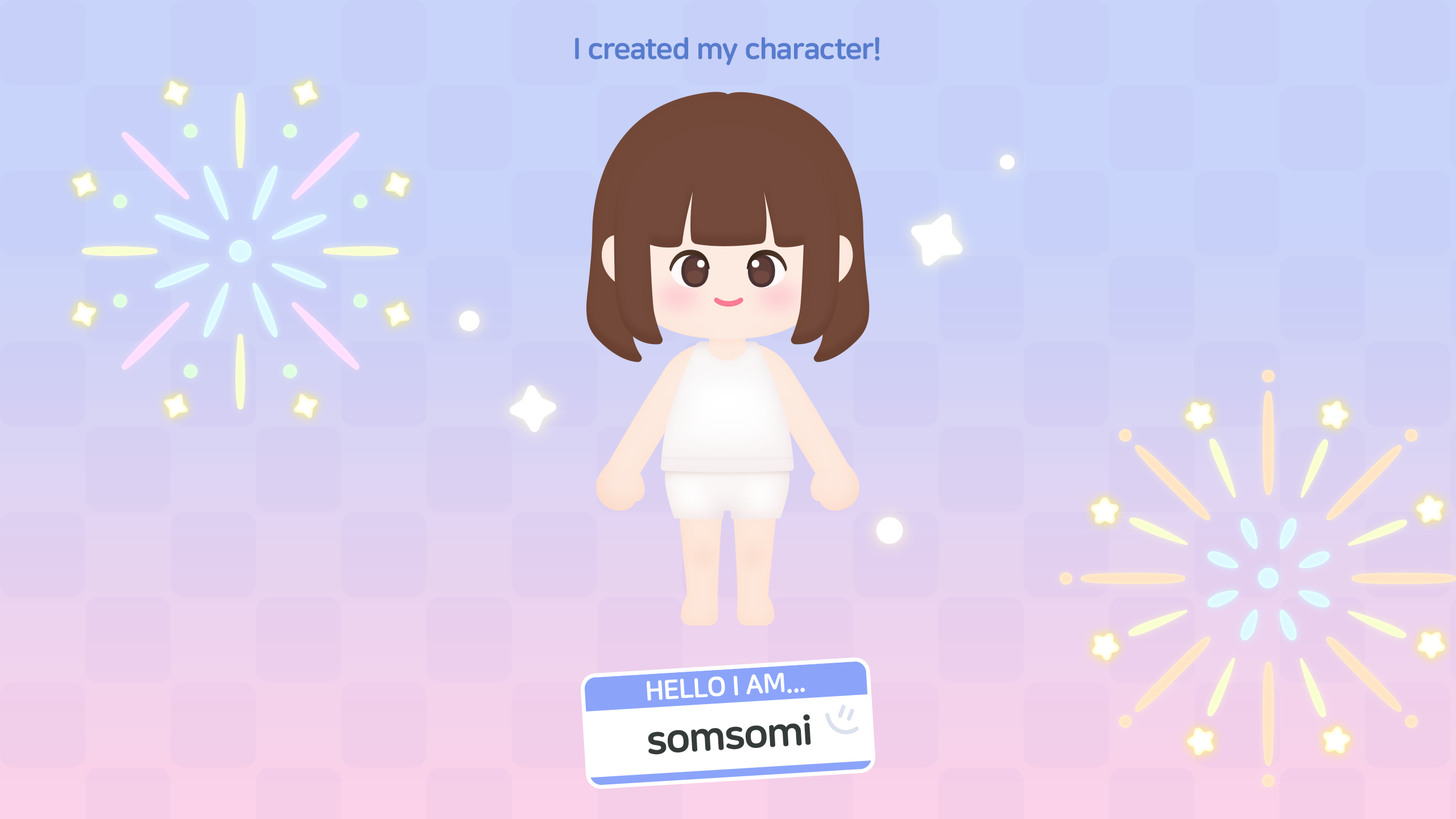
<style>
.page{position:relative;width:1456px;height:819px}
.page>*{position:absolute;margin:0}
.t1{font:29.6px "NanumSquareRoundEB";letter-spacing:-0.02em;color:#587ccd}
.t2{font:27.1px "NanumSquareRoundEB";letter-spacing:-0.02em;color:#ffffff;text-transform:uppercase}
.t3{font:40.6px "NanumSquareRoundEB";letter-spacing:-0.02em;color:#353b39}
</style>
<div class="page">
<p class="t1" style="left:575px;top:37px;width:305px;height:28px">I created my character!</p>
<p class="t2" style="left:647px;top:673px;width:158px;height:28px;rotate:-3deg">Hello I am...</p>
<p class="t3" style="left:648px;top:714px;width:163px;height:41px;rotate:-3deg">somsomi</p>
</div>
